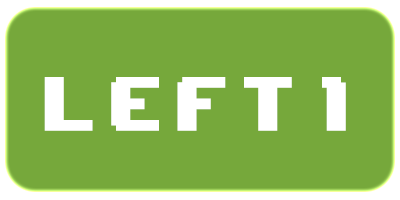
<style>
.page{position:relative;width:400px;height:200px;background:#76a83b}
.page>*{position:absolute;margin:0}
.t1{font:64.3px "8BITWONDERNominal";letter-spacing:0.16em;color:#ffffff;scale:0.89 1}
</style>
<div class="page">
<p class="t1" style="left:44px;top:77px;width:302px;height:54px">left 1</p>
</div>
